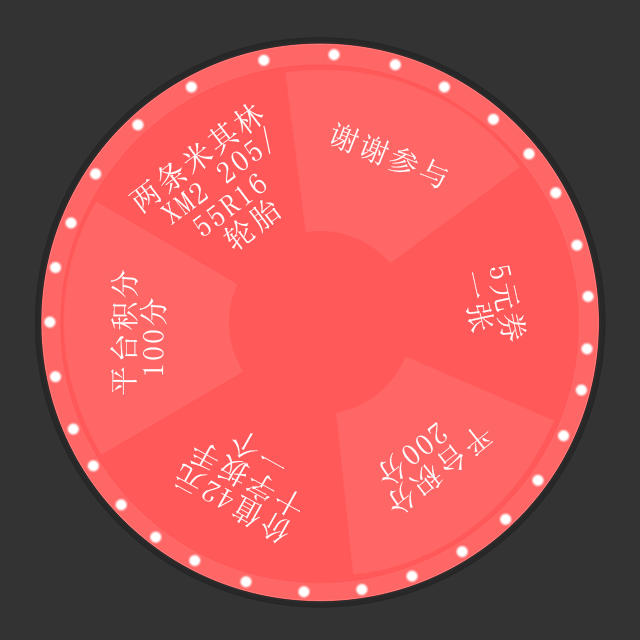
<style>
.page{position:relative;width:640px;height:640px;background:#333333}
.page>*{position:absolute;margin:0}
.t1{font:30px/28.9px "NSimSun";letter-spacing:0.075em;color:#fefefe}
.t2{font:30px "NSimSun";letter-spacing:0.075em;color:#fefefe}
</style>
<div class="page">
<p class="t1" style="left:127px;top:104px;width:154px;height:146px;rotate:-37deg">两条米其林<br> XM2 205/<br>  55R16<br>   轮胎</p>
<p class="t2" style="left:331px;top:122px;width:117px;height:67px;rotate:22deg">谢谢参与</p>
<p class="t1" style="left:110px;top:270px;width:57px;height:125px;rotate:-90deg">平台积分<br> 100分</p>
<p class="t1" style="left:465px;top:265px;width:62px;height:77px;rotate:78deg">5元券 <br> 一张</p>
<p class="t1" style="left:380px;top:422px;width:114px;height:91px;rotate:141deg">平台积分<br>  200分</p>
<p class="t1" style="left:175px;top:433px;width:125px;height:111px;rotate:-151deg">价值42元<br>十字扳手<br>  一个</p>
</div>
